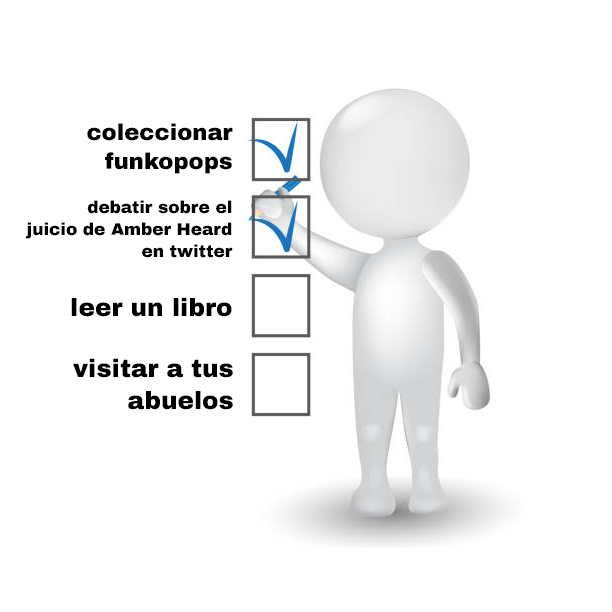
<style>
.page{position:relative;width:612px;height:612px;background:#ffffff}
.page>*{position:absolute;margin:0}
.t1{font:22.7px "ArchivoBlack-Regular";color:#000000}
.t2{font:16.9px "ArchivoBlack-Regular";color:#000000}
.t3{font:24.7px "ArchivoBlack-Regular";color:#000000}
</style>
<div class="page">
<p class="t1" style="left:87px;top:123px;width:146px;height:51px;text-align:right">coleccionar<br>funkopops</p>
<p class="t2" style="left:25px;top:200px;width:208px;height:58px;text-align:right">debatir sobre el<br>juicio de Amber Heard<br>en twitter</p>
<p class="t3" style="left:71px;top:297px;width:161px;height:20px">leer un libro</p>
<p class="t3" style="left:73px;top:358px;width:160px;height:52px;text-align:right">visitar a tus<br>abuelos</p>
</div>
